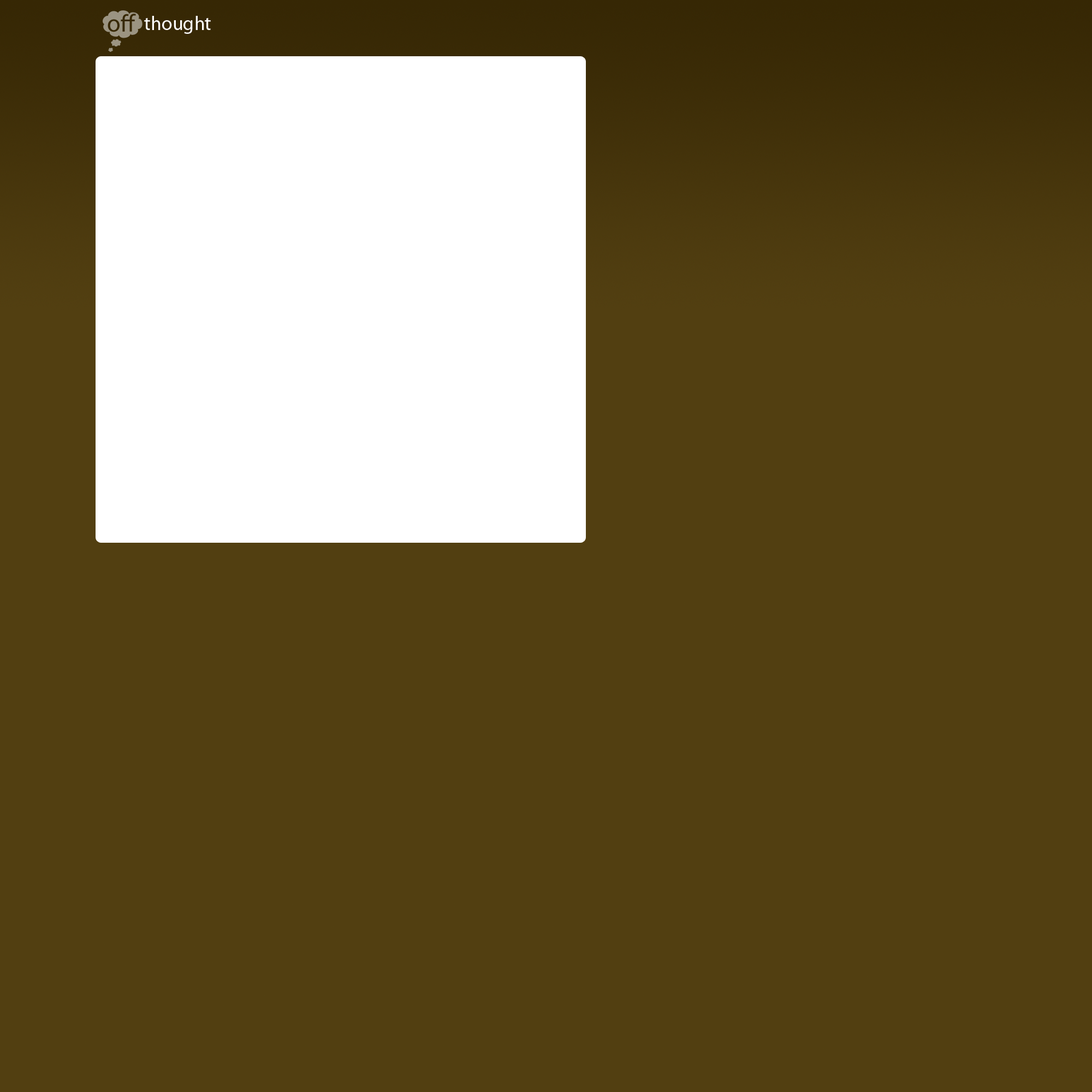
<style>
.page{position:relative;width:1092px;height:1092px;background:#523f11}
.page>*{position:absolute;margin:0}
.t1{font:19.7px "MyriadPro-Regular";color:#ffffff}
</style>
<div class="page">
<p class="t1" style="left:144px;top:16px;width:67px;height:18px">thought</p>
</div>
